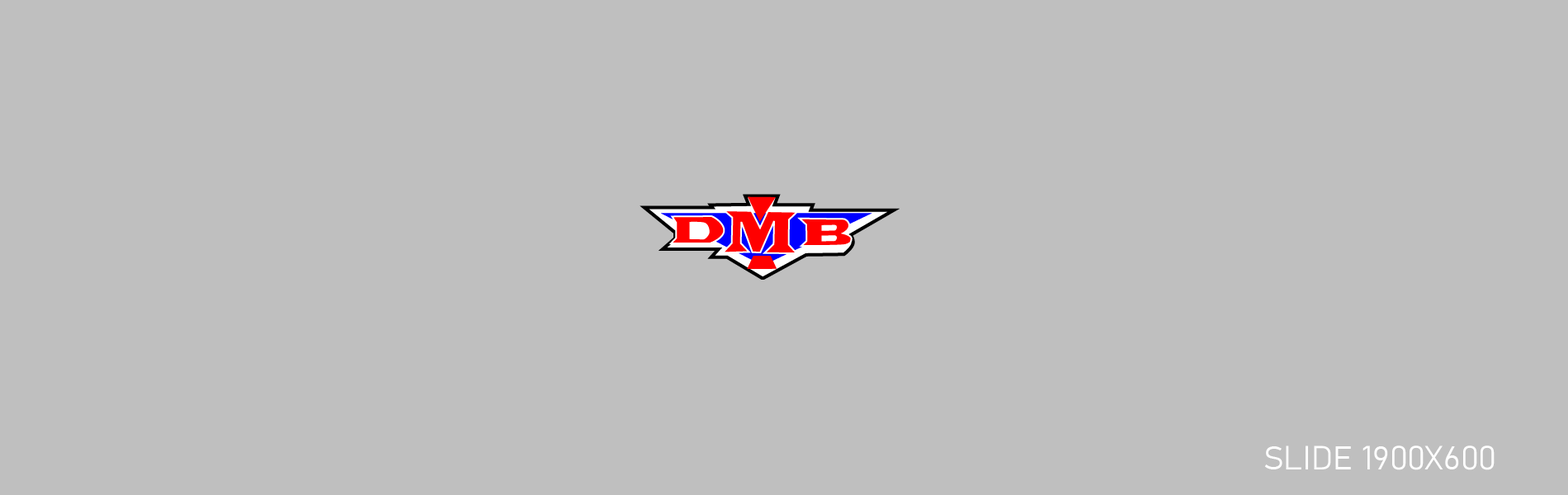
<style>
.page{position:relative;width:1568px;height:495px;background:#bfbfbf}
.page>*{position:absolute;margin:0}
.t1{font:33px "Bahnschrift-Light";color:#ffffff}
</style>
<div class="page">
<p class="t1" style="left:1264px;top:446px;width:231px;height:24px">SLIDE 1900X600</p>
</div>
